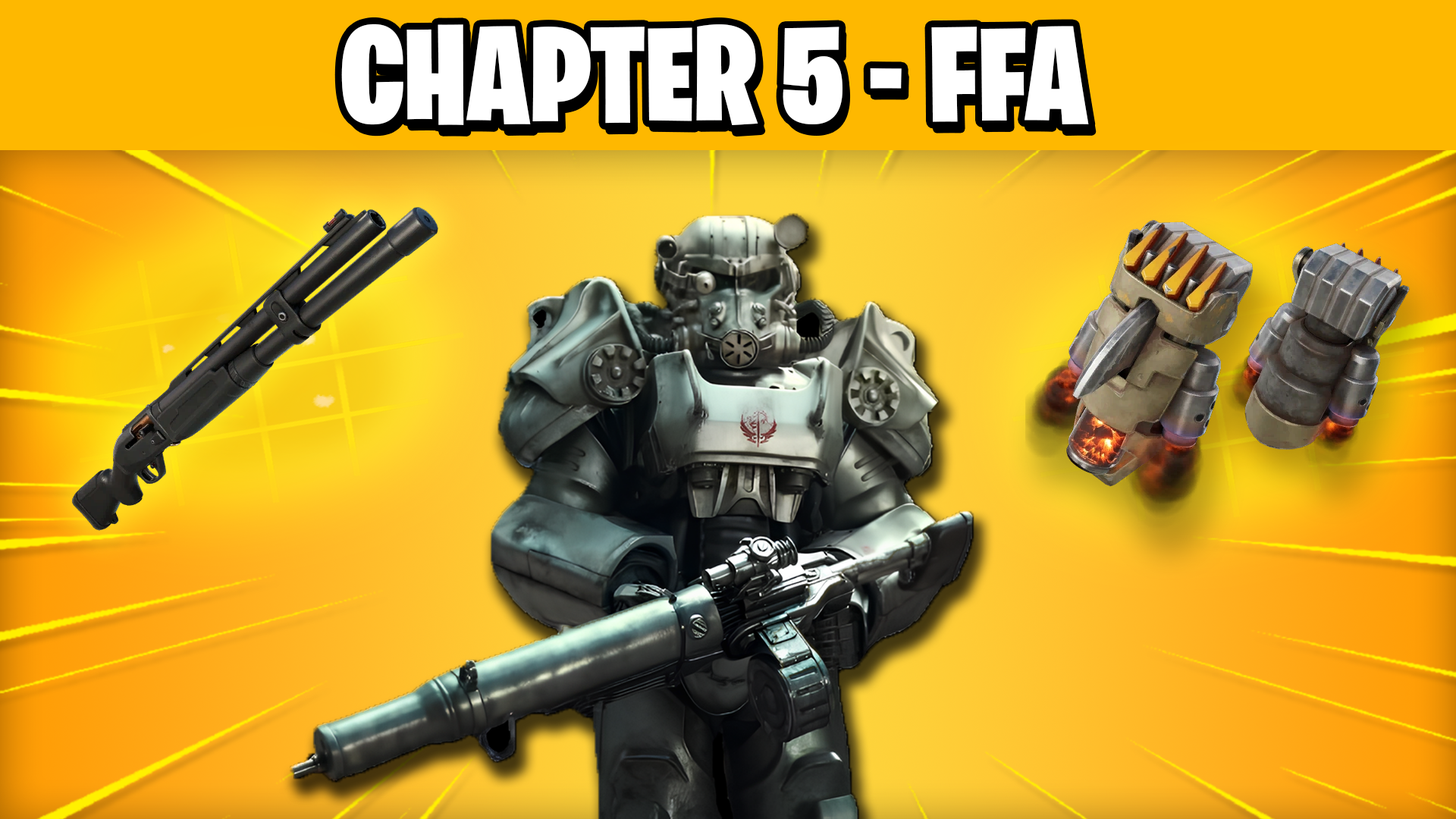
<style>
.page{position:relative;width:1456px;height:819px}
.page>*{position:absolute;margin:0}
.t1{font:136.5px "BurbankBigCondensed-Black";color:#ffffff}
</style>
<div class="page">
<p class="t1" style="left:341px;top:24px;width:748px;height:101px">CHAPTER 5 - FFA</p>
</div>
